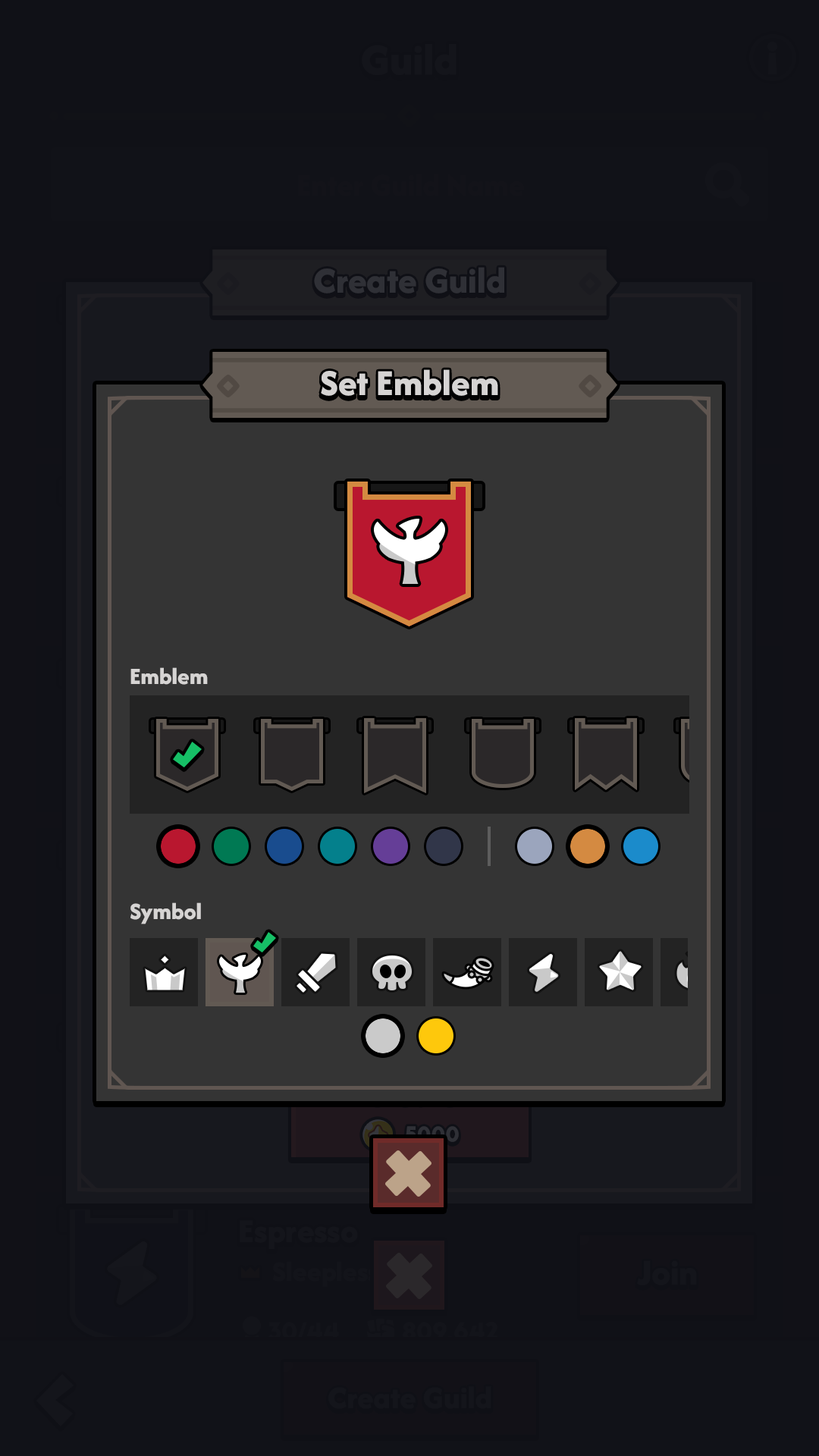
<style>
.page{position:relative;width:819px;height:1456px;background:#343434}
.page>*{position:absolute;margin:0}
.t1{font:37.9px "AfacadFlux-ExtraBold";color:#d6d4d3}
.t2{font:24.3px "AfacadFlux-ExtraBold";color:#d6d4d3}
</style>
<div class="page">
<p class="t1" style="left:321px;top:369px;width:177px;height:27px">Set Emblem</p>
<p class="t2" style="left:130px;top:667px;width:78px;height:18px">Emblem</p>
<p class="t2" style="left:130px;top:902px;width:71px;height:22px">Symbol</p>
</div>
